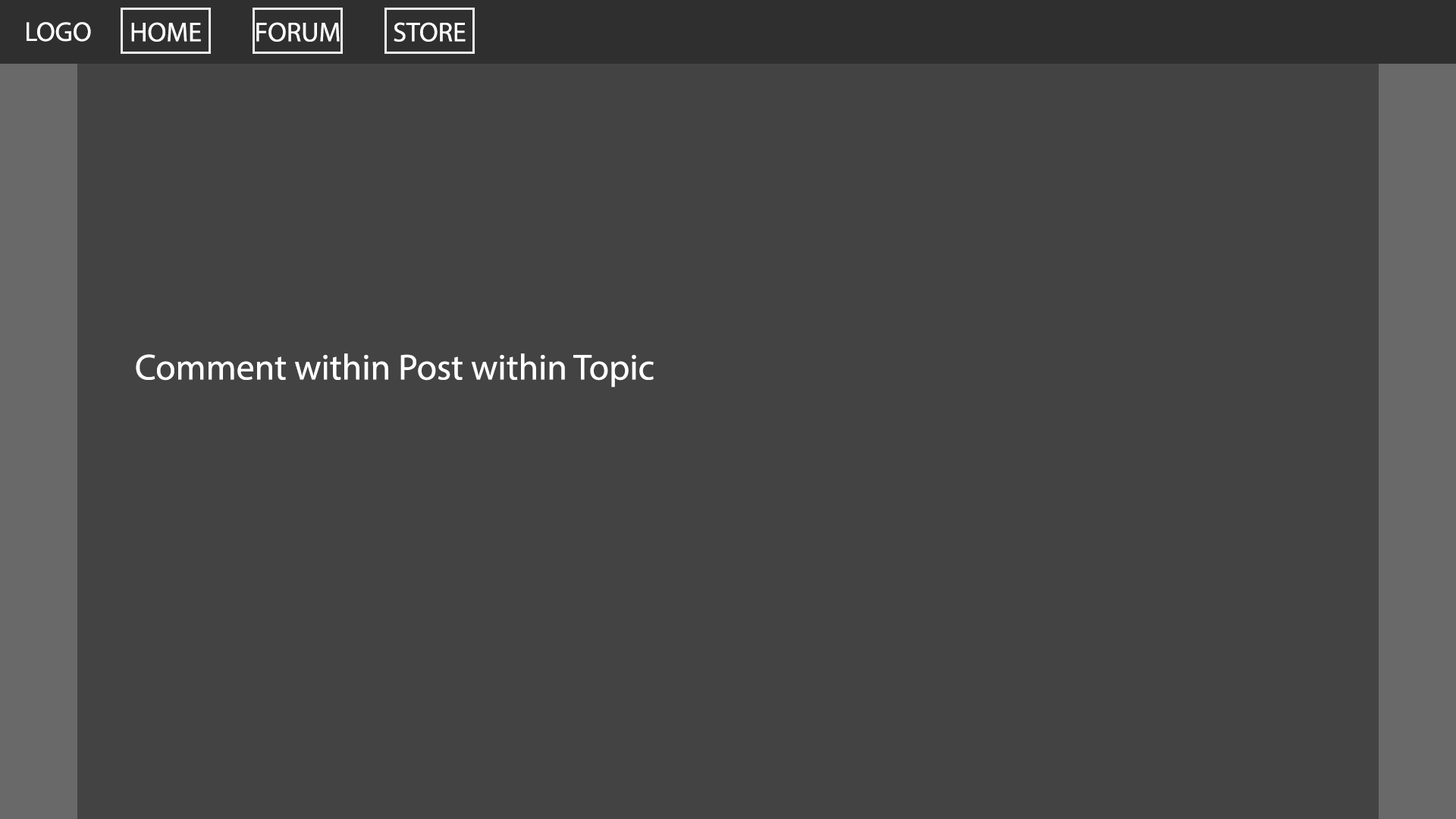
<style>
.page{position:relative;width:1456px;height:819px;background:#434343}
.page>*{position:absolute;margin:0}
.t1{font:27.3px "MyriadPro-Regular";color:#ffffff}
.t2{font:36.4px "MyriadPro-Regular";color:#ffffff}
</style>
<div class="page">
<p class="t1" style="left:27px;top:22px;width:64px;height:20px">LOGO</p>
<p class="t1" style="left:131px;top:22px;width:70px;height:20px">HOME</p>
<p class="t1" style="left:256px;top:22px;width:84px;height:20px">FORUM</p>
<p class="t1" style="left:394px;top:22px;width:72px;height:20px">STORE</p>
<p class="t2" style="left:136px;top:353px;width:518px;height:35px">Comment within Post within Topic</p>
</div>
